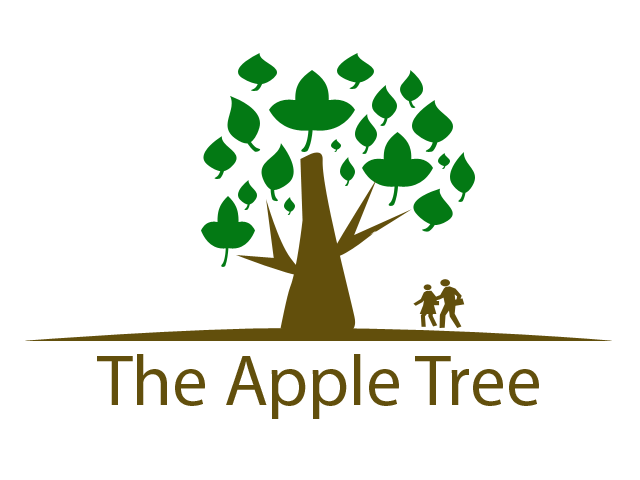
<style>
.page{position:relative;width:640px;height:480px;background:#ffffff}
.page>*{position:absolute;margin:0}
.t1{font:72px "MyriadPro-Regular";color:#624f0c}
</style>
<div class="page">
<p class="t1" style="left:97px;top:354px;width:442px;height:65px">The Apple Tree</p>
</div>
